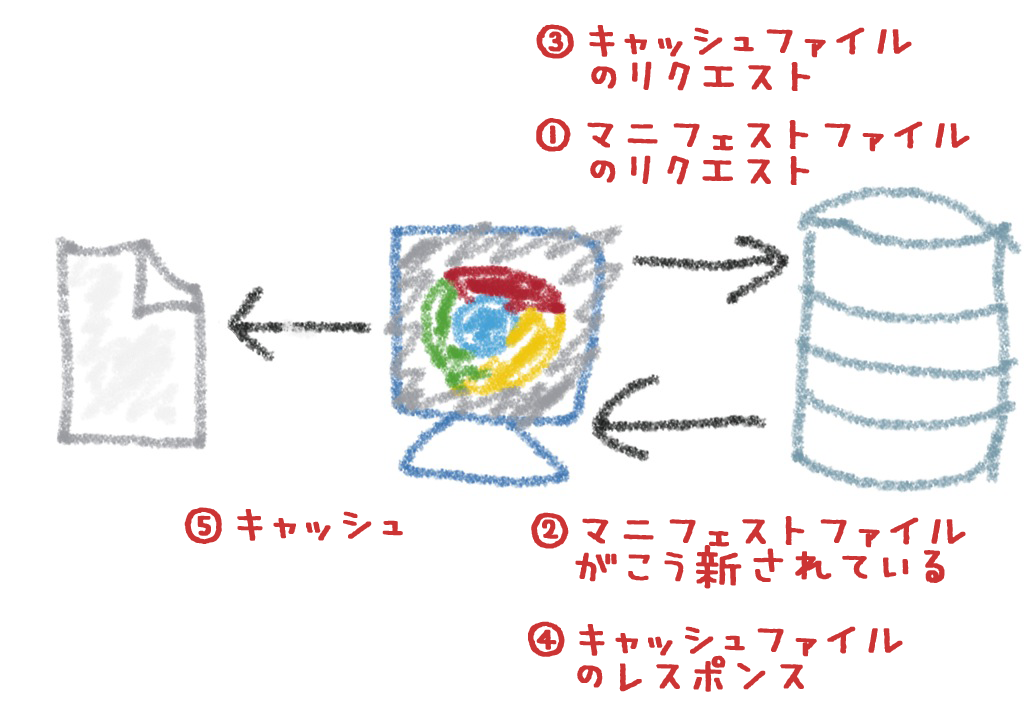
<style>
.page{position:relative;width:1024px;height:718px;background:#ffffff}
.page>*{position:absolute;margin:0}
.t1{font:72px/36px "MiuraLiner-Jr";color:#cc3434;font-weight:bold}
.t2{font:72px "MiuraLiner-Jr";color:#cc3434;font-weight:bold}
</style>
<div class="page">
<p class="t1" style="left:536px;top:24px;width:376px;height:67px;text-align:center">③キャッシュファイル<br>のリクエスト</p>
<p class="t1" style="left:536px;top:118px;width:434px;height:67px;text-align:center">①マニフェストファイル<br>  のリクエスト</p>
<p class="t2" style="left:184px;top:507px;width:219px;height:37px">⑤キャッシュ</p>
<p class="t1" style="left:531px;top:512px;width:435px;height:77px;text-align:center">②マニフェストファイル<br>     がこう新されている</p>
<p class="t1" style="left:528px;top:621px;width:375px;height:71px;text-align:center">④キャッシュファイル<br>   のレスポンス</p>
</div>
